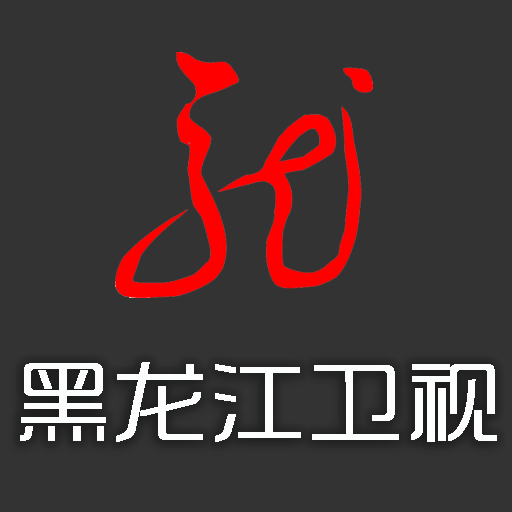
<style>
.page{position:relative;width:512px;height:512px;background:#333333}
.page>*{position:absolute;margin:0}
.t1{font:93.3px "SJshishang-Regular";letter-spacing:0.02em;color:#fcfdfd;font-weight:bold}
</style>
<div class="page">
<p class="t1" style="left:20px;top:362px;width:477px;height:80px">黑龙江卫视</p>
</div>
